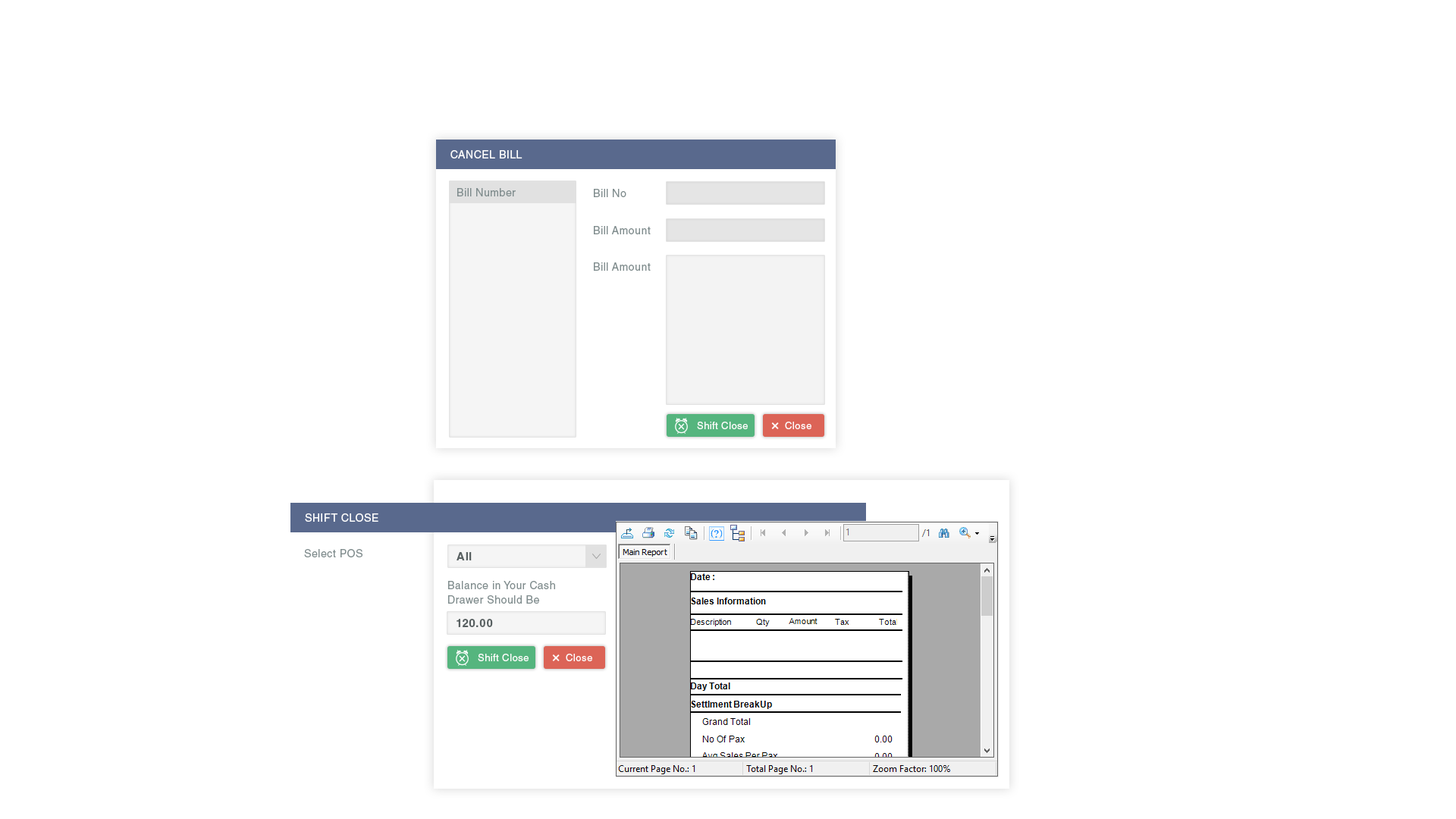
<style>
.page{position:relative;width:1456px;height:819px;background:#ffffff}
.page>*{position:absolute;margin:0}
.t1{font:10.6px "HelveticaLTStd-Roman";letter-spacing:0.04em;color:#ffffff;text-transform:uppercase}
.t2{font:10.6px "HelveticaLTStd-Roman";letter-spacing:0.04em;color:#7f8c8d}
.t3{font:9.9px "HelveticaLTStd-Roman";letter-spacing:0.04em;color:#ffffff}
.t4{font:11.4px "HelveticaLTStd-Bold";letter-spacing:0.04em;color:#586061}
.t5{font:10.6px/14.7px "HelveticaLTStd-Roman";letter-spacing:0.04em;color:#7f8c8d}
</style>
<div class="page">
<p class="t1" style="left:450px;top:150px;width:72px;height:8px">Cancel Bill</p>
<p class="t2" style="left:457px;top:188px;width:59px;height:8px">Bill Number</p>
<p class="t2" style="left:594px;top:189px;width:32px;height:8px">Bill No</p>
<p class="t2" style="left:594px;top:226px;width:57px;height:8px">Bill Amount</p>
<p class="t2" style="left:594px;top:262px;width:57px;height:9px">Bill Amount</p>
<p class="t3" style="left:697px;top:422px;width:51px;height:7px">Shift Close</p>
<p class="t3" style="left:785px;top:422px;width:26px;height:7px">Close</p>
<p class="t1" style="left:305px;top:513px;width:73px;height:9px">Shift Close</p>
<p class="t2" style="left:304px;top:549px;width:58px;height:8px">Select POS</p>
<p class="t4" style="left:457px;top:552px;width:15px;height:8px">All</p>
<p class="t5" style="left:448px;top:581px;width:107px;height:23px">Balance in Your Cash<br>Drawer Should Be</p>
<p class="t4" style="left:457px;top:619px;width:36px;height:8px">120.00</p>
<p class="t3" style="left:478px;top:654px;width:51px;height:7px">Shift Close</p>
<p class="t3" style="left:566px;top:654px;width:26px;height:7px">Close</p>
</div>
